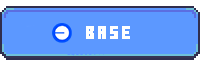
<style>
.page{position:relative;width:200px;height:60px;background:#5c98ff}
.page>*{position:absolute;margin:0}
.t1{font:18.2px "MinecraftTen";letter-spacing:0.2em;color:#ffffff;scale:0.86 1}
</style>
<div class="page">
<p class="t1" style="left:86px;top:26px;width:44px;height:13px">BASE</p>
</div>
